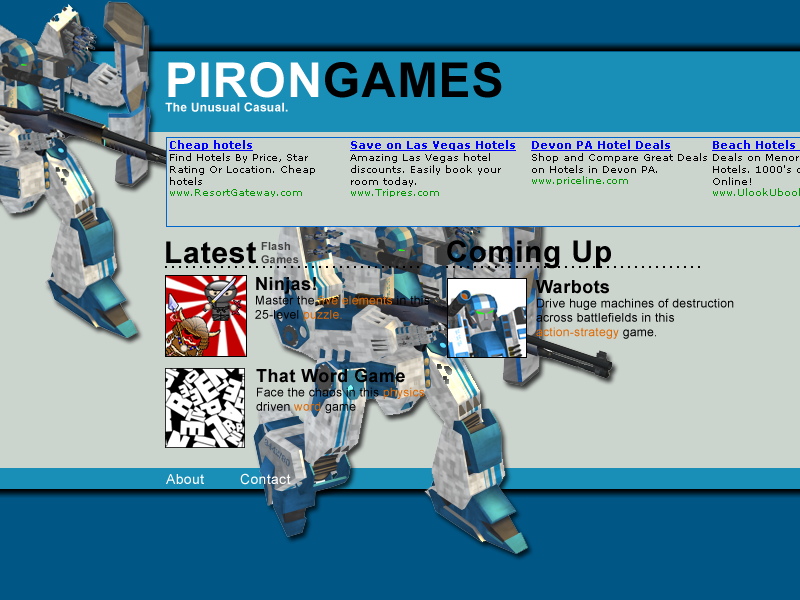
<style>
.page{position:relative;width:800px;height:600px;background:#ccd4ce}
.page>*{position:absolute;margin:0}
.t1{font:12px "Arial-BoldMT";letter-spacing:0.025em;color:#ffffff}
.t2{font:48px "Arial-BoldMT";letter-spacing:0.025em;color:#ffffff;text-transform:uppercase}
.t3{font:48px "Arial-BoldMT";letter-spacing:0.025em;color:#000000;text-transform:uppercase}
.t4{font:30px "Arial-BoldMT";letter-spacing:0.025em;color:#000000}
.t5{font:11px "Arial-BoldMT";letter-spacing:0.025em;color:#424242}
.t6{font:12px "ArialMT";letter-spacing:0.025em;color:#000000}
.t7{font:18px "Arial-BoldMT";letter-spacing:0.025em;color:#000000}
.t8{font:12px "ArialMT";letter-spacing:0.025em;color:#e06900}
.t9{font:12px "ArialMT";letter-spacing:0.025em;color:#9b9b9b;font-variant:small-caps}
.t10{font:14px "ArialMT";letter-spacing:0.025em;color:#ffffff}
</style>
<div class="page">
<p class="t1" style="left:165px;top:62px;width:337px;height:50px"><span class="t2">PIRON</span><span class="t3">GAMES<br></span>The Unusual Casual.</p>
<p class="t4" style="left:166px;top:241px;width:90px;height:23px">Latest</p>
<p class="t5" style="left:261px;top:242px;width:38px;height:22px">Flash<br>Games</p>
<p class="t4" style="left:447px;top:240px;width:164px;height:29px">Coming Up</p>
<p class="t6" style="left:255px;top:277px;width:175px;height:45px"><span class="t7">Ninjas!<br></span>Master the <span class="t8">five elements </span>in this <br>25-level <span class="t8">puzzle.</span></p>
<p class="t6" style="left:536px;top:280px;width:198px;height:59px"><span class="t7">Warbots<br></span>Drive huge machines of destruction <br>across battlefields in this <br><span class="t8">action-strategy </span>game.</p>
<p class="t6" style="left:256px;top:368px;width:169px;height:46px"><span class="t7">That Word Game<br></span>Face the chaos in this <span class="t8">physics<br></span>driven <span class="t8">word </span>game<span class="t9">.</span></p>
<p class="t10" style="left:240px;top:473px;width:51px;height:12px">Contact</p>
<p class="t10" style="left:166px;top:474px;width:38px;height:10px">About</p>
</div>
